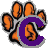
<style>
.page{position:relative;width:48px;height:48px;background:#ffffff}
.page>*{position:absolute;margin:0}
.t1{font:40px "Arial-BoldMT";color:#4e0a7b}
</style>
<div class="page">
<p class="t1" style="left:19px;top:17px;width:25px;height:29px">C</p>
</div>
